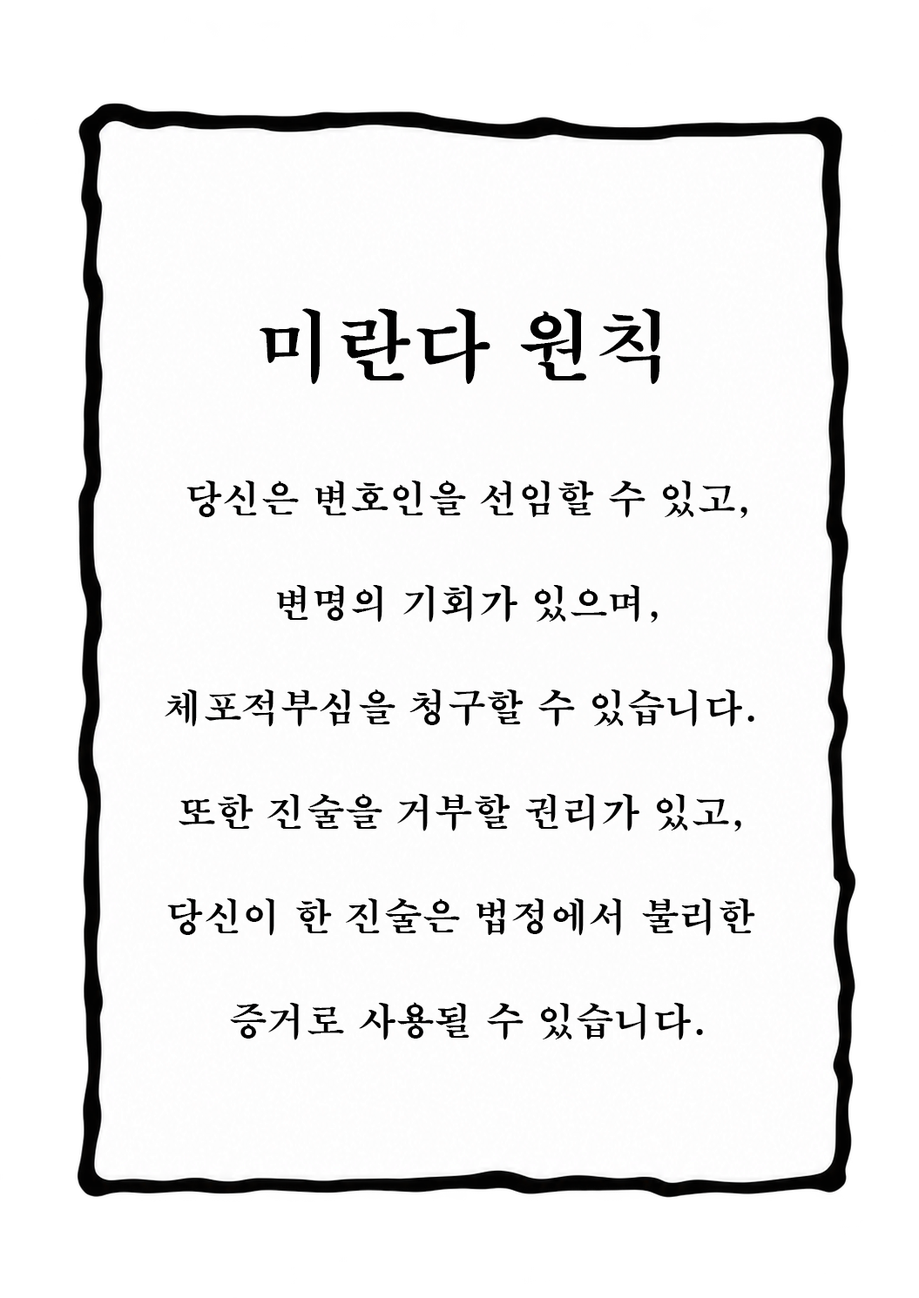
<style>
.page{position:relative;width:919px;height:1298px;background:#ffffff}
.page>*{position:absolute;margin:0}
.t1{font:78.4px "H2mjrE";color:#010101}
.t2{font:38.5px/104.5px "H2mjrE";color:#010101}
</style>
<div class="page">
<p class="t1" style="left:259px;top:308px;width:401px;height:77px">미란다 원칙</p>
<p class="t2" style="left:165px;top:481px;width:590px;height:559px;text-align:center">당신은 변호인을 선임할 수 있고,<br> 변명의 기회가 있으며, <br>체포적부심을 청구할 수 있습니다. <br>또한 진술을 거부할 권리가 있고, <br>당신이 한 진술은 법정에서 불리한 <br>증거로 사용될 수 있습니다.</p>
</div>
